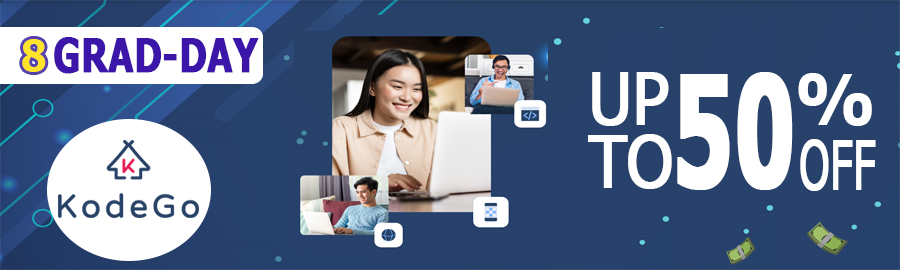
<style>
.page{position:relative;width:900px;height:270px}
.page>*{position:absolute;margin:0}
.t1{font:42.1px "Tahoma-Bold";color:#ffe42b;scale:0.95 1}
.t2{font:46.7px "Tahoma-Bold";color:#3c16a9;font-weight:bold;scale:0.78 1}
.t3{font:71.1px/63.4px "Tahoma";color:#ffffff;font-weight:bold;scale:0.92 1}
.t4{font:153.4px "Tahoma-Bold";color:#ffffff;font-weight:bold;scale:0.6 1}
.t5{font:69.8px "Tahoma-Bold";color:#ffffff;scale:0.96 1}
.t6{font:67.9px "Tahoma";color:#ffffff;font-weight:bold;scale:0.61 1}
</style>
<div class="page">
<p class="t1" style="left:22px;top:39px;width:24px;height:33px">8</p>
<p class="t2" style="left:54px;top:37px;width:205px;height:37px">GRAD-DAY</p>
<p class="t3" style="left:588px;top:72px;width:84px;height:117px;text-align:right">UP<br>TO</p>
<p class="t4" style="left:677px;top:72px;width:116px;height:118px">50</p>
<p class="t5" style="left:798px;top:73px;width:74px;height:53px">%</p>
<p class="t6" style="left:800px;top:139px;width:76px;height:52px">OFF</p>
</div>
